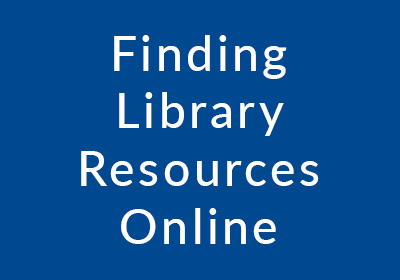
<style>
.page{position:relative;width:400px;height:280px;background:#004990}
.page>*{position:absolute;margin:0}
.t1{font:48px "Lato-Medium";letter-spacing:0.075em;color:#ffffff}
</style>
<div class="page">
<p class="t1" style="left:81px;top:35px;width:238px;height:209px;text-align:center">Finding<br>Library<br>Resources<br>Online</p>
</div>
